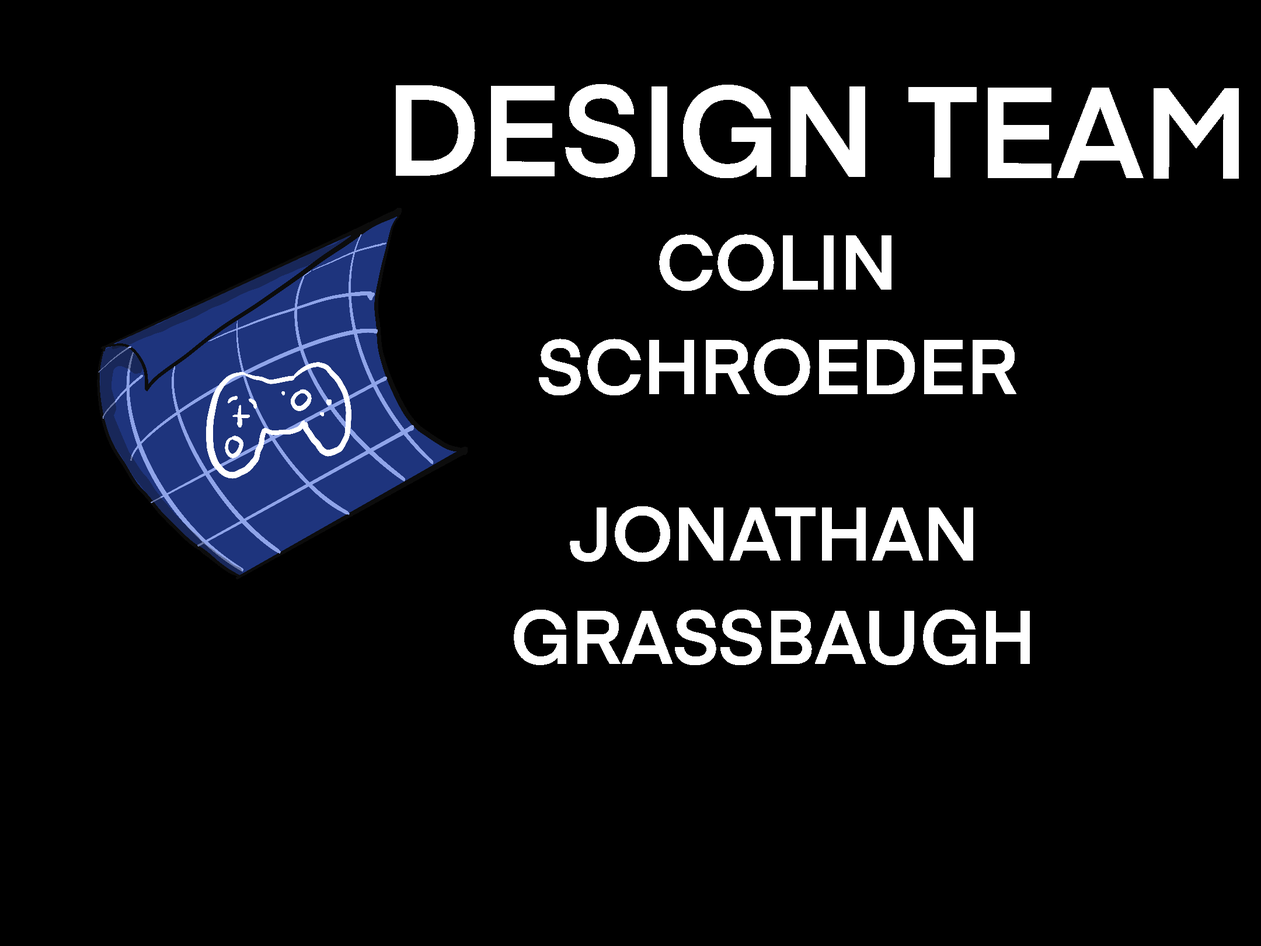
<style>
.page{position:relative;width:1261px;height:946px;background:#000000}
.page>*{position:absolute;margin:0}
.t1{font:126.4px "Eina01-SemiBold";color:#ffffff}
.t2{font:75.8px "Eina01-SemiBold";color:#ffffff}
.t3{font:74.7px "Eina01-SemiBold";color:#ffffff}
</style>
<div class="page">
<p class="t1" style="left:0px;top:0px;width:1261px;height:946px;text-align:center">DESIGN TEAM</p>
<p class="t2" style="left:0px;top:0px;width:1261px;height:946px;text-align:center">COLIN SCHROEDER</p>
<p class="t3" style="left:0px;top:0px;width:1261px;height:946px;text-align:center">JONATHAN GRASSBAUGH</p>
</div>
